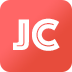
<style>
.page{position:relative;width:72px;height:72px;background:#ff6666}
.page>*{position:absolute;margin:0}
.t1{font:45.8px "Phosphate-Inline";color:#ffffff}
</style>
<div class="page">
<p class="t1" style="left:13px;top:18px;width:47px;height:33px">Jc</p>
</div>
